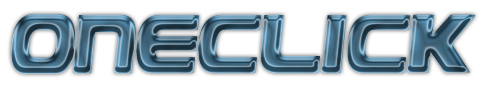
<style>
.page{position:relative;width:479px;height:96px;background:#ffffff}
.page>*{position:absolute;margin:0}
.t1{font:83.3px "!-PEPSI-!";font-weight:bold}
</style>
<div class="page">
<p class="t1" style="left:11px;top:14px;width:465px;height:60px">Onecl1ck</p>
</div>
